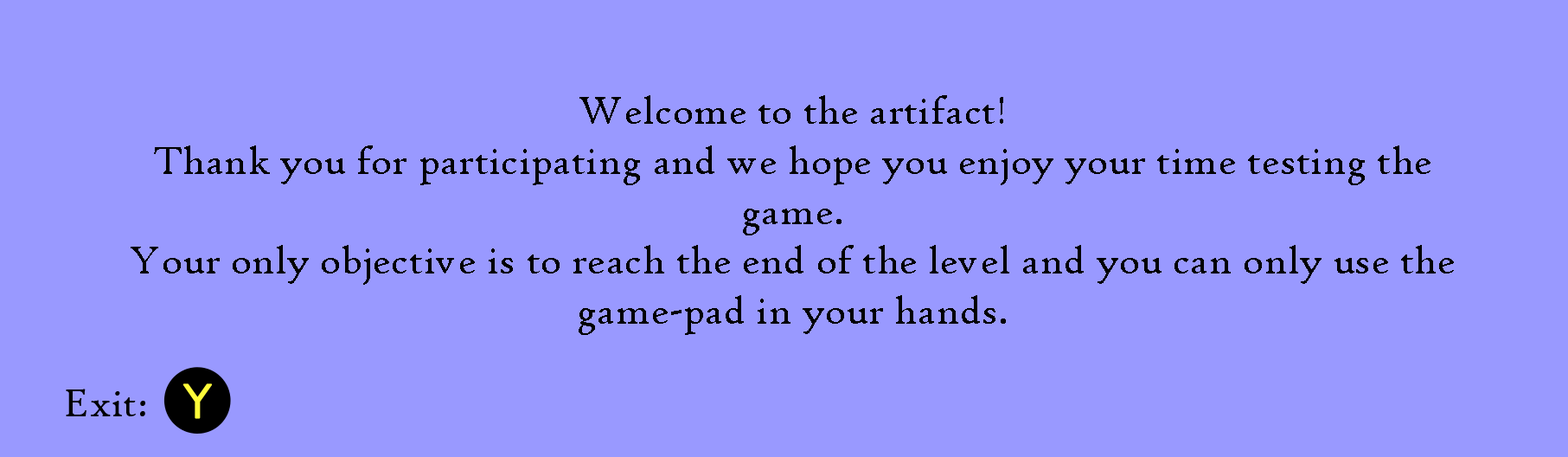
<style>
.page{position:relative;width:1568px;height:457px;background:#9999ff}
.page>*{position:absolute;margin:0}
.t1{font:41.5px "HighTowerText-Reg";letter-spacing:0.005em;color:#000000}
</style>
<div class="page">
<p class="t1" style="left:131px;top:95px;width:1323px;height:240px;text-align:center">Welcome to the artifact! <br>Thank you for participating and we hope you enjoy your time testing the game. <br>Your only objective is to reach the end of the level and you can only use the game-pad in your hands.</p>
</div>
